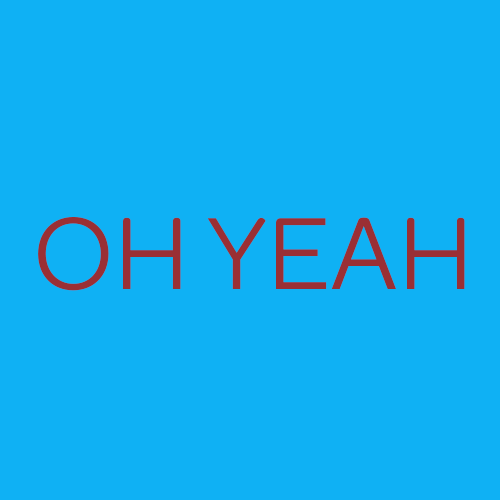
<style>
.page{position:relative;width:500px;height:500px;background:#0fb1f4}
.page>*{position:absolute;margin:0}
.t1{font:109.3px "Omnes_ATT-Regular";letter-spacing:-0.021em;color:#9a2f34}
</style>
<div class="page">
<p class="t1" style="left:38px;top:216px;width:427px;height:75px">OH YEAH</p>
</div>
